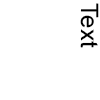
<style>
.page{position:relative;width:100px;height:100px;background:#ffffff}
.page>*{position:absolute;margin:0}
.t1{font:24px "ArialMT";color:#000000}
</style>
<div class="page">
<p class="t1" style="left:80px;top:3px;width:19px;height:45px">Text</p>
</div>
